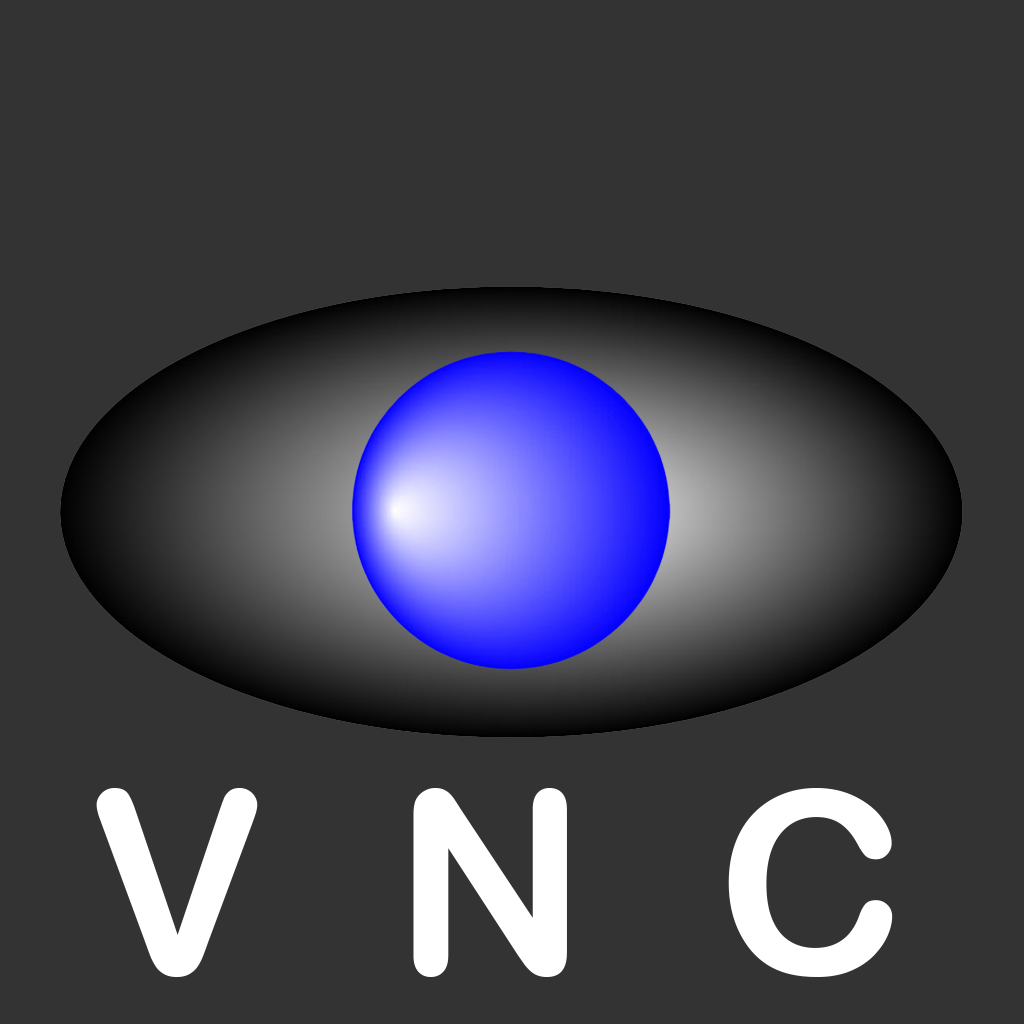
<style>
.page{position:relative;width:1024px;height:1024px;background:#333333}
.page>*{position:absolute;margin:0}
.t1{font:256px "ArialRoundedMTBold";color:#ffffff}
</style>
<div class="page">
<p class="t1" style="left:96px;top:788px;width:797px;height:189px">V  N  C</p>
</div>
